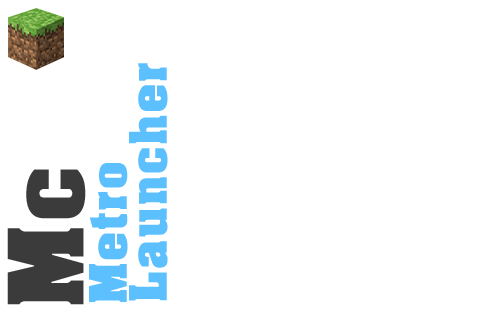
<style>
.page{position:relative;width:493px;height:312px;background:#ffffff}
.page>*{position:absolute;margin:0}
.t1{font:49.7px "AcmeFont";letter-spacing:0.02em;color:#5cc0ff}
.t2{font:99.5px "AcmeFont";letter-spacing:0.02em;color:#3c3b3b}
</style>
<div class="page">
<p class="t1" style="left:129px;top:63px;width:39px;height:238px;rotate:-90deg">Launcher</p>
<p class="t2" style="left:7px;top:169px;width:79px;height:136px;rotate:-90deg">Mc</p>
<p class="t1" style="left:89px;top:163px;width:39px;height:139px;rotate:-90deg">Metro</p>
</div>
